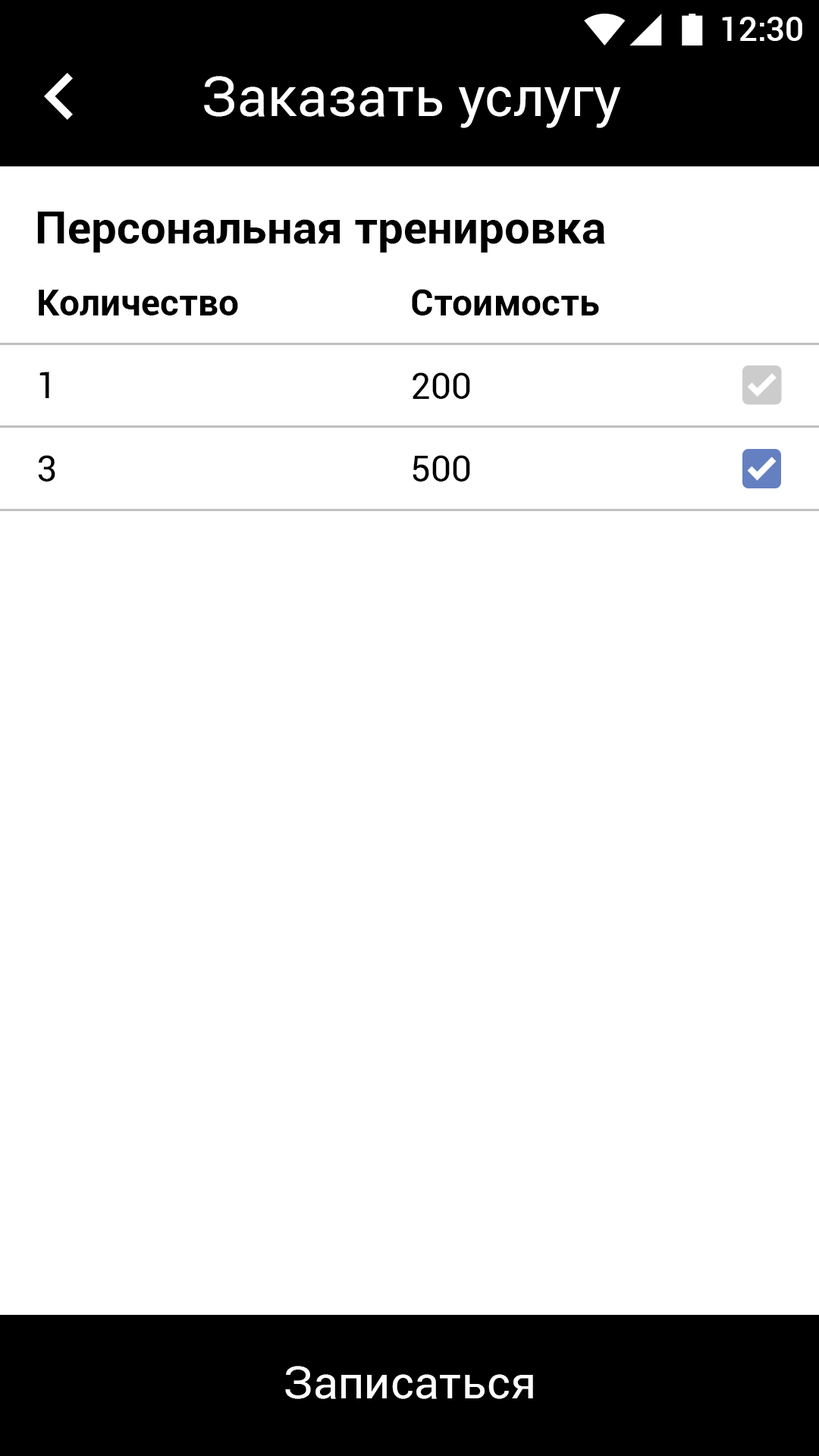
<style>
.page{position:relative;width:819px;height:1456px;background:#ffffff}
.page>*{position:absolute;margin:0}
.t1{font:33.4px "Roboto-Medium";color:#ffffff}
.t2{font:54.6px "Roboto-Regular";color:#ffffff}
.t3{font:45.5px "Roboto-Bold";color:#000000}
.t4{font:36.4px "Roboto-Bold";color:#000000}
.t5{font:36.4px "Roboto-Regular";color:#000000}
.t6{font:45.5px "Roboto-Regular";color:#ffffff}
</style>
<div class="page">
<p class="t1" style="left:722px;top:17px;width:80px;height:24px">12:30</p>
<p class="t2" style="left:204px;top:76px;width:417px;height:52px">Заказать услугу</p>
<p class="t3" style="left:37px;top:212px;width:568px;height:41px">Персональная тренировка</p>
<p class="t4" style="left:39px;top:290px;width:199px;height:25px">Количество</p>
<p class="t4" style="left:412px;top:289px;width:187px;height:26px">Стоимость</p>
<p class="t5" style="left:39px;top:372px;width:10px;height:26px">1</p>
<p class="t5" style="left:413px;top:372px;width:57px;height:27px">200</p>
<p class="t5" style="left:38px;top:455px;width:17px;height:27px">3</p>
<p class="t5" style="left:413px;top:455px;width:57px;height:27px">500</p>
<p class="t6" style="left:285px;top:1366px;width:248px;height:33px">Записаться</p>
</div>
